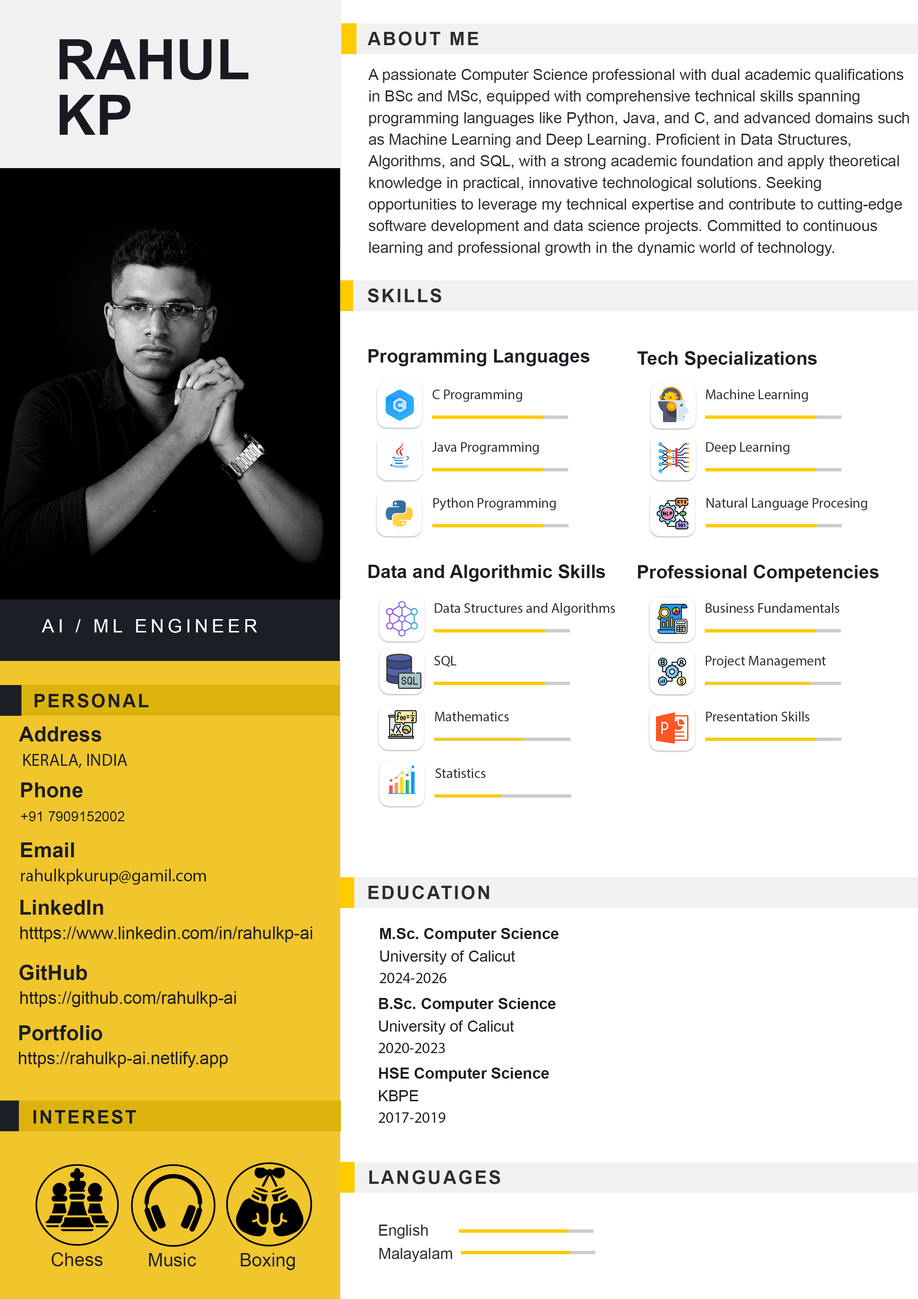
<style>
.page{position:relative;width:918px;height:1299px;background:#ffffff}
.page>*{position:absolute;margin:0}
.t1{font:55.5px/55.5px "Arial-BoldMT";color:#191a21;text-transform:uppercase}
.t2{font:18.5px "Arial-BoldMT";letter-spacing:0.1em;color:#2d2d2d;text-transform:uppercase}
.t3{font:15.4px/21.6px "ArialMT";color:#2d2d2d}
.t4{font:18.5px "Arial-BoldMT";color:#1c1e25}
.t5{font:13.9px "MyriadPro-Regular";color:#2d2d2d}
.t6{font:18.5px "ArialMT";letter-spacing:0.2em;color:#ffffff;text-transform:uppercase}
.t7{font:18.5px "Arial-BoldMT";letter-spacing:0.1em;color:#1c1e25;text-transform:uppercase}
.t8{font:20.8px "Arial-BoldMT";color:#1c1e25}
.t9{font:17.3px "MyriadPro-Regular";color:#1c1e25}
.t10{font:13.9px "ArialMT";color:#1c1e25}
.t11{font:17.3px "ArialMT";color:#1c1e25}
.t12{font:15.4px "Arial-BoldMT";color:#1c1e25}
.t13{font:15.4px/21.6px "ArialMT";color:#1c1e25}
.t14{font:15.4px/21.6px "MyriadPro-Regular";color:#1c1e25}
.t15{font:15.4px "ArialMT";color:#2d2d2d}
.t16{font:18.5px "ArialMT";color:#22222d}
</style>
<div class="page">
<p class="t1" style="left:59px;top:39px;width:190px;height:96px">RAHUL<br>KP</p>
<p class="t2" style="left:368px;top:31px;width:110px;height:15px">about me</p>
<p class="t3" style="left:368px;top:69px;width:541px;height:187px">A passionate Computer Science professional with dual academic qualifications in BSc and MSc, equipped with comprehensive technical skills spanning programming languages like Python, Java, and C, and advanced domains such as Machine Learning and Deep Learning. Proficient in Data Structures, Algorithms, and SQL, with a strong academic foundation and apply theoretical knowledge in practical, innovative technological solutions. Seeking opportunities to leverage my technical expertise and contribute to cutting-edge software development and data science projects. Committed to continuous learning and professional growth in the dynamic world of technology.</p>
<p class="t2" style="left:368px;top:288px;width:73px;height:14px">Skills</p>
<p class="t4" style="left:368px;top:349px;width:222px;height:17px">Programming Languages</p>
<p class="t4" style="left:638px;top:351px;width:179px;height:17px">Tech Specializations</p>
<p class="t5" style="left:432px;top:389px;width:90px;height:13px">C Programming</p>
<p class="t5" style="left:706px;top:389px;width:102px;height:13px">Machine Learning</p>
<p class="t5" style="left:432px;top:442px;width:107px;height:12px">Java Programming</p>
<p class="t5" style="left:706px;top:442px;width:84px;height:12px">Deep Learning</p>
<p class="t5" style="left:433px;top:498px;width:123px;height:13px">Python Programming</p>
<p class="t5" style="left:707px;top:498px;width:160px;height:12px">Natural Language Procesing</p>
<p class="t4" style="left:368px;top:564px;width:237px;height:18px">Data and Algorithmic Skills</p>
<p class="t4" style="left:638px;top:565px;width:241px;height:17px">Professional Competencies</p>
<p class="t5" style="left:435px;top:603px;width:180px;height:12px">Data Structures and Algorithms</p>
<p class="t5" style="left:706px;top:603px;width:134px;height:10px">Business Fundamentals</p>
<p class="t6" style="left:42px;top:619px;width:215px;height:14px">Ai / Ml Engineer</p>
<p class="t5" style="left:434px;top:656px;width:22px;height:11px">SQL</p>
<p class="t5" style="left:706px;top:656px;width:120px;height:12px">Project Management</p>
<p class="t7" style="left:34px;top:693px;width:114px;height:14px">PERSONAL</p>
<p class="t5" style="left:435px;top:711px;width:74px;height:10px">Mathematics</p>
<p class="t5" style="left:706px;top:711px;width:104px;height:10px">Presentation Skills</p>
<p class="t8" style="left:19px;top:726px;width:82px;height:16px">Address</p>
<p class="t9" style="left:23px;top:754px;width:104px;height:14px">KERALA, INDIA</p>
<p class="t5" style="left:435px;top:768px;width:51px;height:10px">Statistics</p>
<p class="t8" style="left:21px;top:782px;width:62px;height:15px">Phone</p>
<p class="t10" style="left:21px;top:811px;width:103px;height:10px">+91 7909152002</p>
<p class="t8" style="left:21px;top:842px;width:53px;height:15px">Email</p>
<p class="t9" style="left:21px;top:869px;width:185px;height:15px">rahulkpkurup@gamil.com</p>
<p class="t2" style="left:368px;top:885px;width:121px;height:14px">EDUCATION</p>
<p class="t8" style="left:20px;top:900px;width:83px;height:15px">LinkedIn</p>
<p class="t11" style="left:20px;top:926px;width:292px;height:16px">htttps://www.linkedin.com/in/rahulkp-ai</p>
<p class="t12" style="left:380px;top:928px;width:179px;height:14px">M.Sc. Computer Science</p>
<p class="t13" style="left:380px;top:950px;width:135px;height:33px">University of Calicut<br><span class="t14">2024-2026</span></p>
<p class="t8" style="left:19px;top:964px;width:68px;height:16px">GitHub</p>
<p class="t11" style="left:20px;top:991px;width:216px;height:16px">https://github.com/rahulkp-ai</p>
<p class="t12" style="left:379px;top:998px;width:177px;height:14px">B.Sc. Computer Science</p>
<p class="t8" style="left:19px;top:1025px;width:84px;height:15px">Portfolio</p>
<p class="t13" style="left:379px;top:1020px;width:135px;height:33px">University of Calicut<br><span class="t14">2020-2023</span></p>
<p class="t11" style="left:19px;top:1051px;width:209px;height:16px">https://rahulkp-ai.netlify.app</p>
<p class="t12" style="left:379px;top:1067px;width:170px;height:14px">HSE Computer Science</p>
<p class="t14" style="left:379px;top:1090px;width:66px;height:33px"><span class="t13">KBPE<br></span>2017-2019</p>
<p class="t7" style="left:33px;top:1110px;width:103px;height:14px">INTEREST</p>
<p class="t2" style="left:369px;top:1170px;width:131px;height:14px">LANGUAGES</p>
<p class="t15" style="left:379px;top:1224px;width:49px;height:14px">English</p>
<p class="t16" style="left:51px;top:1252px;width:52px;height:14px">Chess</p>
<p class="t16" style="left:149px;top:1253px;width:47px;height:13px">Music</p>
<p class="t16" style="left:241px;top:1253px;width:54px;height:17px">Boxing</p>
<p class="t15" style="left:379px;top:1248px;width:73px;height:14px">Malayalam</p>
</div>
